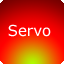
<style>
.page{position:relative;width:64px;height:64px}
.page>*{position:absolute;margin:0}
.t1{font:14.9px "Verdana";color:#ffffff}
</style>
<div class="page">
<p class="t1" style="left:8px;top:24px;width:43px;height:13px">Servo</p>
</div>
